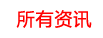
<style>
.page{position:relative;width:103px;height:38px;background:#ffffff}
.page>*{position:absolute;margin:0}
.t1{font:18px "MicrosoftYaHei";letter-spacing:0.05em;color:#ff0000}
</style>
<div class="page">
<p class="t1" style="left:16px;top:10px;width:76px;height:18px">所有资讯</p>
</div>
